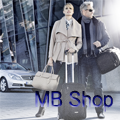
<style>
.page{position:relative;width:120px;height:120px}
.page>*{position:absolute;margin:0}
.t1{font:22px "ArialMT";scale:0.88 1}
</style>
<div class="page">
<p class="t1" style="left:35px;top:90px;width:78px;height:22px">MB Shop</p>
</div>
